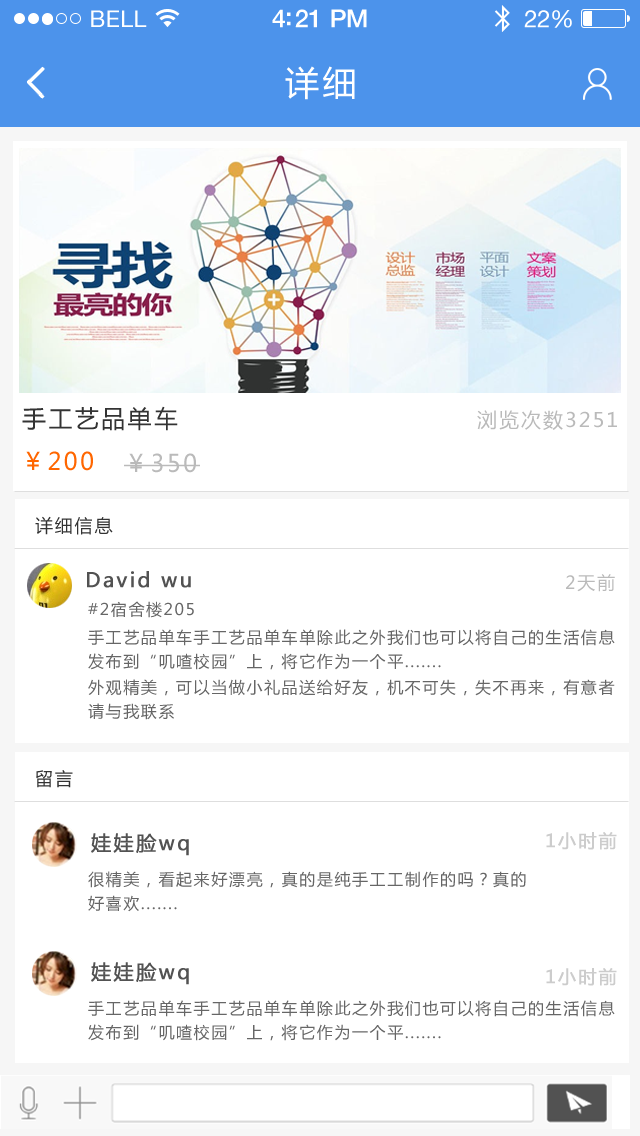
<style>
.page{position:relative;width:640px;height:1136px;background:#ffffff}
.page>*{position:absolute;margin:0}
.t1{font:23px "HelveticaNeue";letter-spacing:0.02em;color:#ffffff}
.t2{font:25px "HelveticaNeue-Medium";letter-spacing:-0.02em;color:#ffffff}
.t3{font:24px "HelveticaNeue";letter-spacing:-0.02em;color:#ffffff}
.t4{font:34px "MicrosoftYaHei";letter-spacing:0.1em;color:#ffffff}
.t5{font:24px "MicrosoftYaHei";letter-spacing:0.1em;color:#333333}
.t6{font:20px "MicrosoftYaHei";letter-spacing:0.1em;color:#bababa}
.t7{font:24px "MicrosoftYaHei";letter-spacing:0.1em;color:#ff6600}
.t8{font:24px "MicrosoftYaHei";letter-spacing:0.1em;color:#bababa}
.t9{font:18px "MicrosoftYaHei";letter-spacing:0.1em;color:#333333}
.t10{font:20px "MicrosoftYaHei";letter-spacing:0.1em;color:#525252;font-weight:bold}
.t11{font:18px "MicrosoftYaHei";letter-spacing:0.1em;color:#bababa}
.t12{font:16px "MicrosoftYaHei";letter-spacing:0.1em;color:#666666}
.t13{font:16px/24px "MicrosoftYaHei";letter-spacing:0.1em;color:#666666}
.t14{font:18px "MicrosoftYaHei";letter-spacing:0.1em;color:#cccccc;font-weight:bold}
</style>
<div class="page">
<p class="t1" style="left:91px;top:10px;width:56px;height:17px">BELL</p>
<p class="t2" style="left:272px;top:9px;width:95px;height:19px">4:21 PM</p>
<p class="t3" style="left:524px;top:10px;width:48px;height:18px">22%</p>
<p class="t4" style="left:285px;top:66px;width:70px;height:34px">详细</p>
<p class="t5" style="left:22px;top:406px;width:156px;height:25px">手工艺品单车</p>
<p class="t6" style="left:477px;top:410px;width:140px;height:20px">浏览次数3251</p>
<p class="t7" style="left:26px;top:451px;width:67px;height:20px">￥200</p>
<p class="t8" style="left:124px;top:453px;width:76px;height:20px">￥350</p>
<p class="t9" style="left:35px;top:516px;width:78px;height:19px">详细信息</p>
<p class="t10" style="left:87px;top:571px;width:104px;height:17px">David wu</p>
<p class="t11" style="left:566px;top:574px;width:49px;height:18px">2天前</p>
<p class="t12" style="left:88px;top:601px;width:106px;height:17px">#2宿舍楼205</p>
<p class="t13" style="left:88px;top:629px;width:527px;height:41px">手工艺品单车手工艺品单车单除此之外我们也可以将自己的生活信息<br>发布到“叽喳校园”上，将它作为一个平.......</p>
<p class="t13" style="left:88px;top:679px;width:527px;height:41px">外观精美，可以当做小礼品送给好友，机不可失，失不再来，有意者<br>请与我联系</p>
<p class="t9" style="left:36px;top:770px;width:37px;height:18px">留言</p>
<p class="t10" style="left:91px;top:833px;width:98px;height:23px">娃娃脸wq</p>
<p class="t14" style="left:546px;top:832px;width:71px;height:18px">1小时前</p>
<p class="t13" style="left:88px;top:871px;width:438px;height:41px">很精美，看起来好漂亮，真的是纯手工工制作的吗？真的<br>好喜欢.......</p>
<p class="t10" style="left:91px;top:962px;width:98px;height:23px">娃娃脸wq</p>
<p class="t14" style="left:546px;top:968px;width:71px;height:18px">1小时前</p>
<p class="t13" style="left:88px;top:1000px;width:527px;height:41px">手工艺品单车手工艺品单车单除此之外我们也可以将自己的生活信息<br>发布到“叽喳校园”上，将它作为一个平.......</p>
</div>
